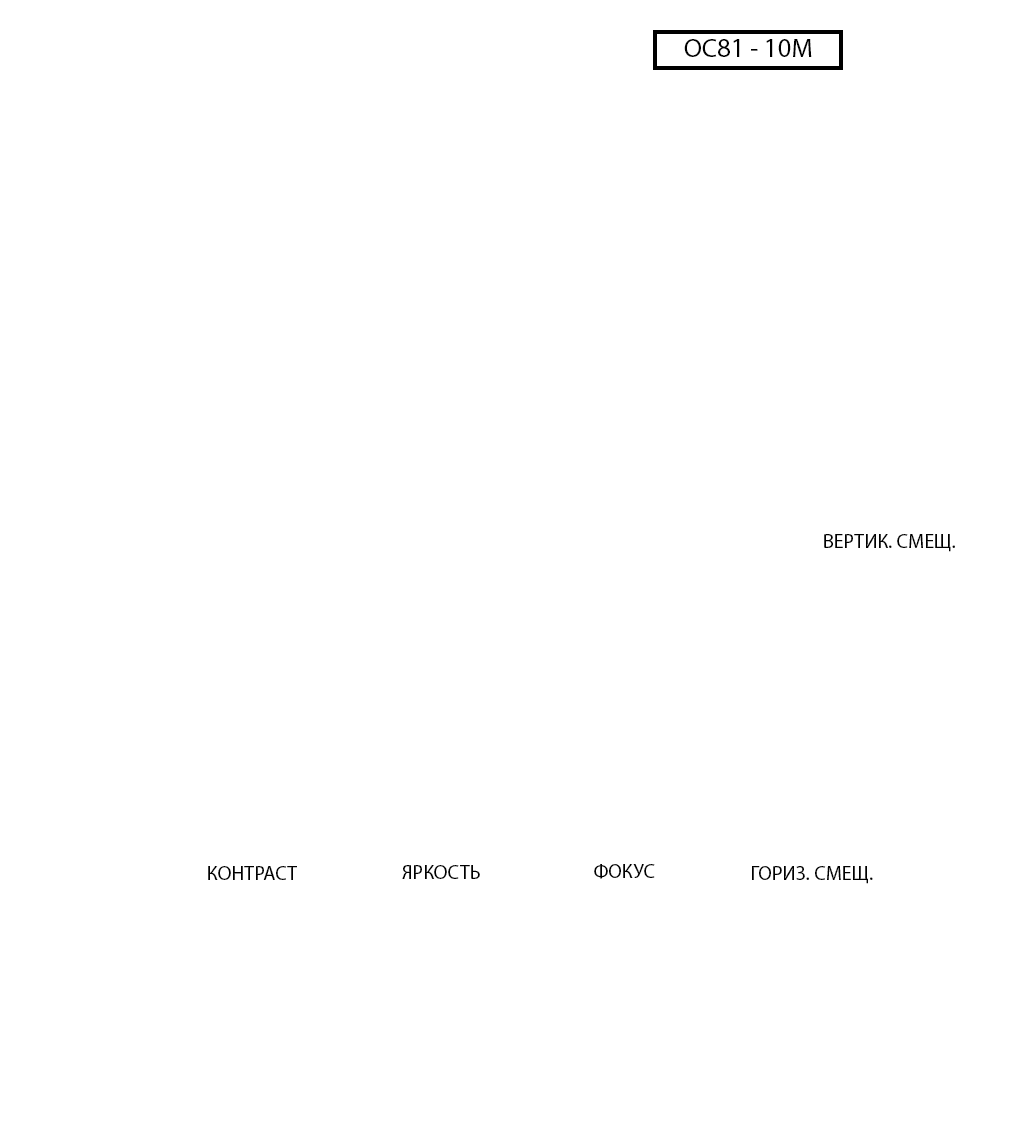
<style>
.page{position:relative;width:1024px;height:1148px;background:#ffffff}
.page>*{position:absolute;margin:0}
.t1{font:26.7px "MyriadPro-Regular";color:#000000}
.t2{font:20px "MyriadPro-Regular";color:#000000}
</style>
<div class="page">
<p class="t1" style="left:684px;top:39px;width:128px;height:18px">ОС81 - 10М</p>
<p class="t2" style="left:824px;top:534px;width:131px;height:18px">ВЕРТИК. СМЕЩ.</p>
<p class="t2" style="left:208px;top:866px;width:89px;height:14px">КОНТРАСТ</p>
<p class="t2" style="left:402px;top:865px;width:78px;height:14px">ЯРКОСТЬ</p>
<p class="t2" style="left:594px;top:864px;width:61px;height:15px">ФОКУС</p>
<p class="t2" style="left:752px;top:866px;width:121px;height:18px">ГОРИЗ. СМЕЩ.</p>
</div>
